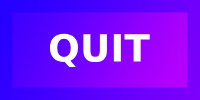
<style>
.page{position:relative;width:200px;height:100px}
.page>*{position:absolute;margin:0}
.t1{font:37.5px "DejaVuSans-Bold";color:#ffffff}
</style>
<div class="page">
<p class="t1" style="left:49px;top:33px;width:101px;height:34px">QUIT</p>
</div>
